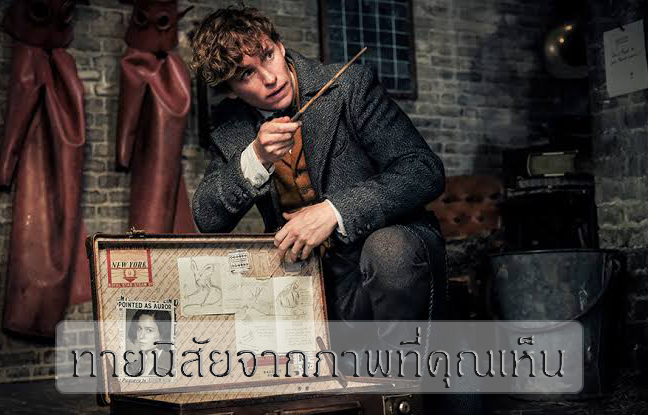
<style>
.page{position:relative;width:648px;height:415px}
.page>*{position:absolute;margin:0}
.t1{font:65px "JasmineDSE"}
</style>
<div class="page">
<p class="t1" style="left:71px;top:327px;width:495px;height:61px">ทายนิสัยจากภาพที่คุณเห็น</p>
</div>
